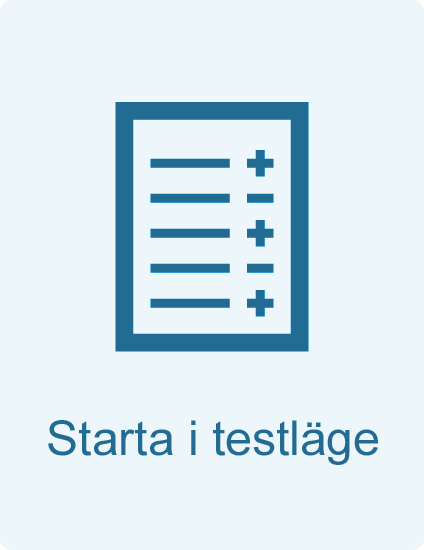
<style>
.page{position:relative;width:424px;height:550px;background:#ecf6fb}
.page>*{position:absolute;margin:0}
.t1{font:48px "ArialMT";color:#226b93}
</style>
<div class="page">
<p class="t1" style="left:48px;top:420px;width:330px;height:45px">Starta i testläge</p>
</div>
